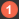
<style>
.page{position:relative;width:19px;height:19px;background:#f5674b}
.page>*{position:absolute;margin:0}
.t1{font:12px "Arial-BoldMT";color:#ffffff}
</style>
<div class="page">
<p class="t1" style="left:6px;top:5px;width:5px;height:9px">1</p>
</div>
